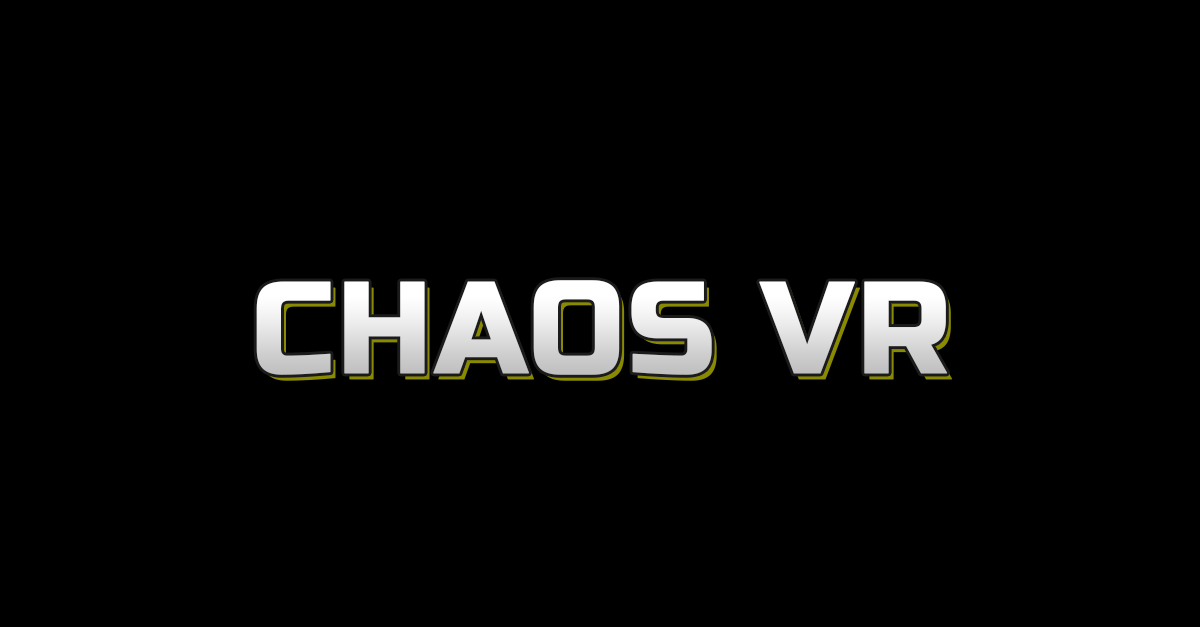
<style>
.page{position:relative;width:1200px;height:627px;background:#000000}
.page>*{position:absolute;margin:0}
.t1{font:130.5px "RussoOne-Regular";font-weight:bold}
</style>
<div class="page">
<p class="t1" style="left:256px;top:280px;width:692px;height:95px">CHAOS VR</p>
</div>
